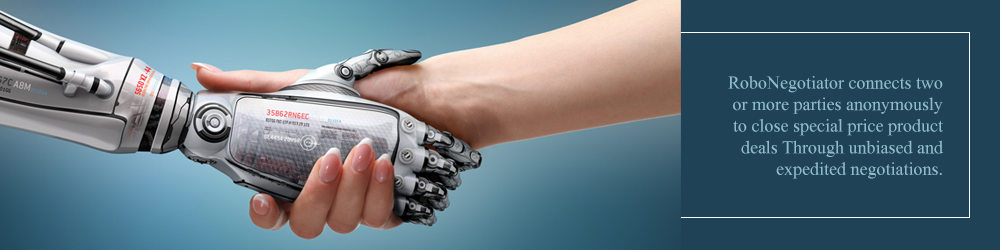
<style>
.page{position:relative;width:1000px;height:250px;background:#1f4256}
.page>*{position:absolute;margin:0}
.t1{font:18px "MongolianBaiti";color:#8ebcca}
</style>
<div class="page">
<p class="t1" style="left:728px;top:76px;width:216px;height:103px;text-align:right">RoboNegotiator connects two or more parties anonymously to close special price product deals Through unbiased and expedited negotiations.</p>
</div>
